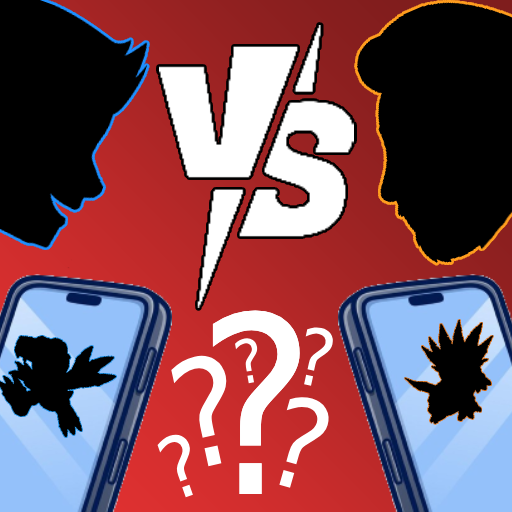
<style>
.page{position:relative;width:512px;height:512px;background:#000000}
.page>*{position:absolute;margin:0}
.t1{font:247.3px "DejaVuSansCondensed";color:#ffffff}
.t2{font:79.3px "DejaVuSansCondensed";color:#ffffff}
.t3{font:60.1px "DejaVuSansCondensed";color:#ffffff}
.t4{font:148.2px "DejaVuSansCondensed";color:#ffffff}
.t5{font:123.7px "DejaVuSansCondensed";color:#ffffff}
.t6{font:85.2px "DejaVuSansCondensed";color:#ffffff}
</style>
<div class="page">
<p class="t1" style="left:212px;top:310px;width:88px;height:184px">?</p>
<p class="t1" style="left:212px;top:310px;width:88px;height:184px">?</p>
<p class="t2" style="left:304px;top:327px;width:29px;height:59px;rotate:12deg">?</p>
<p class="t3" style="left:235px;top:338px;width:23px;height:46px;rotate:-10deg">?</p>
<p class="t4" style="left:171px;top:355px;width:56px;height:112px;rotate:-12deg">?</p>
<p class="t5" style="left:279px;top:397px;width:50px;height:91px;rotate:16deg">?</p>
<p class="t6" style="left:157px;top:434px;width:36px;height:64px;rotate:-20deg">?</p>
</div>
